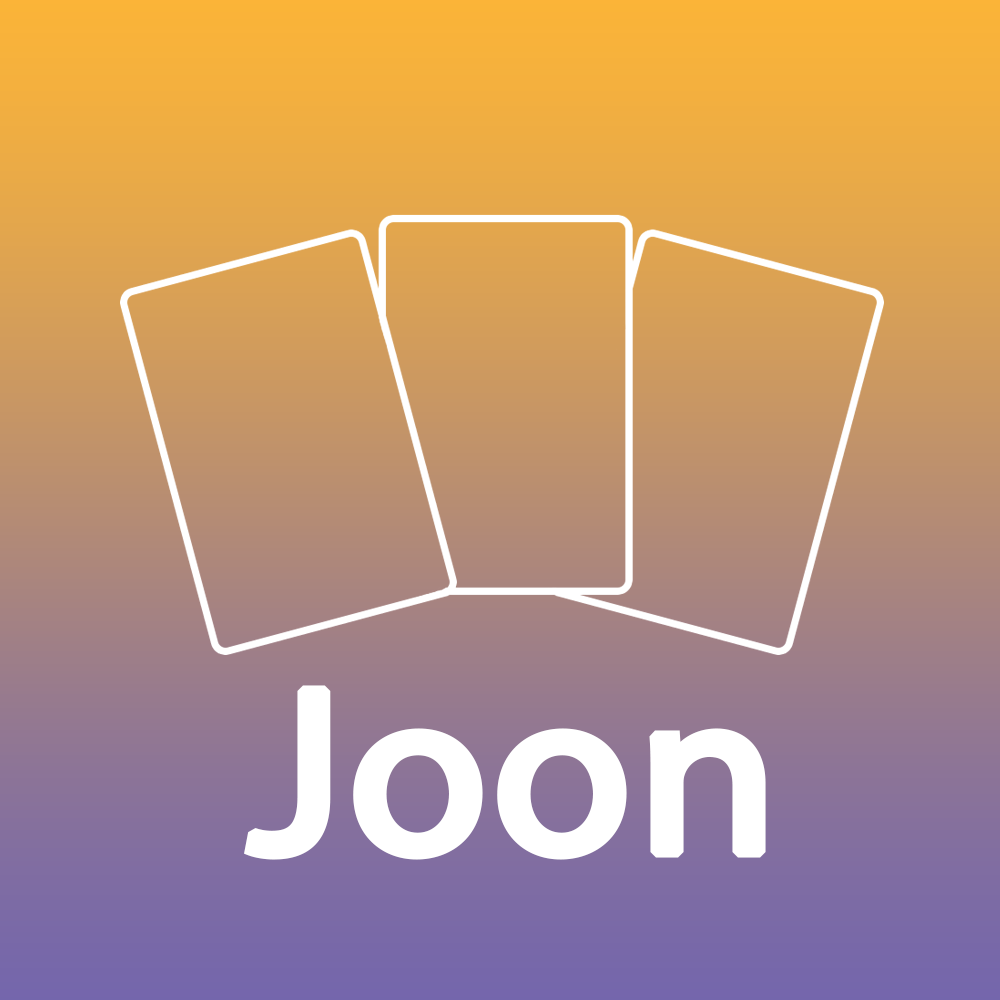
<style>
.page{position:relative;width:1000px;height:1000px}
.page>*{position:absolute;margin:0}
.t1{font:238.9px "MyriadPro-Regular";color:#ffffff;font-weight:bold;scale:1.05 1}
</style>
<div class="page">
<p class="t1" style="left:244px;top:685px;width:522px;height:175px">Joon</p>
</div>
